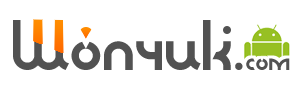
<style>
.page{position:relative;width:297px;height:105px;background:#ffffff}
.page>*{position:absolute;margin:0}
.t1{font:62.5px "Sabomaster";color:#525252}
.t2{font:25px "Sabomaster";color:#525252}
</style>
<div class="page">
<p class="t1" style="left:13px;top:20px;width:277px;height:50px">Шопчик.<span class="t2">com</span></p>
</div>
